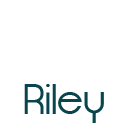
<style>
.page{position:relative;width:128px;height:128px;background:#ffffff}
.page>*{position:absolute;margin:0}
.t1{font:42.7px "Opificio";color:#08454c}
</style>
<div class="page">
<p class="t1" style="left:24px;top:84px;width:80px;height:39px">Riley</p>
</div>
